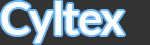
<style>
.page{position:relative;width:150px;height:45px;background:#333333}
.page>*{position:absolute;margin:0}
.t1{font:45.8px "Lato-Bold";letter-spacing:-0.04em;color:#ffffff}
</style>
<div class="page">
<p class="t1" style="left:1px;top:1px;width:124px;height:42px">Cyltex</p>
</div>
